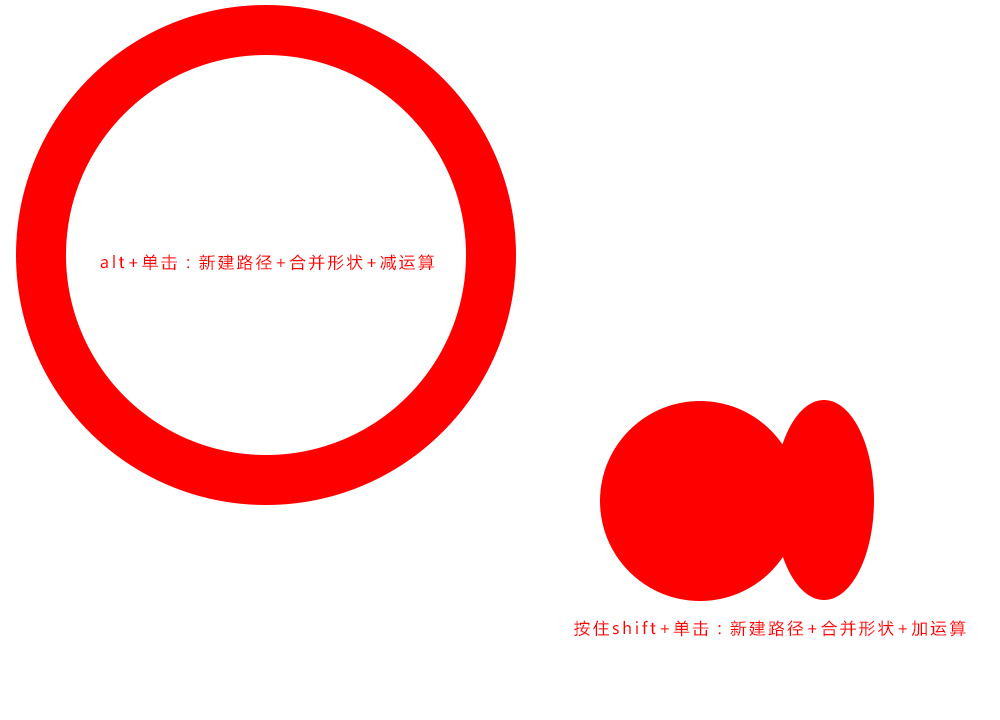
<style>
.page{position:relative;width:1000px;height:720px;background:#ffffff}
.page>*{position:absolute;margin:0}
.t1{font:16.2px "MicrosoftYaHei";letter-spacing:0.16em;color:#ff0000}
</style>
<div class="page">
<p class="t1" style="left:100px;top:254px;width:334px;height:17px">alt+单击：新建路径+合并形状+减运算</p>
<p class="t1" style="left:574px;top:620px;width:392px;height:17px">按住shift+单击：新建路径+合并形状+加运算</p>
</div>
